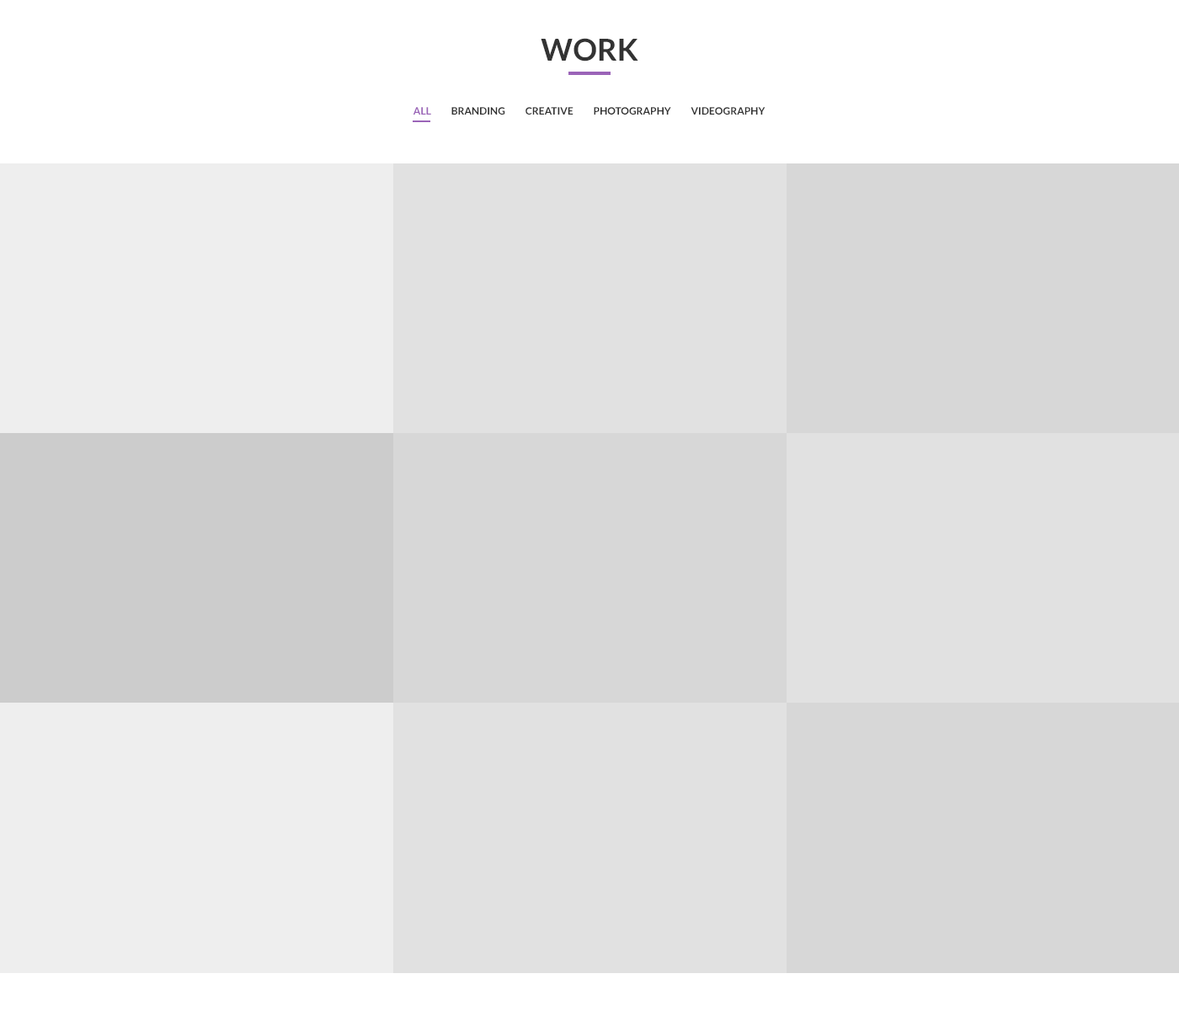
<style>
.page{position:relative;width:1179px;height:1011px;background:#e1e1e1}
.page>*{position:absolute;margin:0}
.t1{font:30.4px "Lato-Bold";letter-spacing:0.005em;color:#333333}
.t2{font:10.1px "Lato-Bold";letter-spacing:0.005em;color:#333333}
.t3{font:10.1px "Lato-Bold";letter-spacing:0.005em;color:#9b64b8}
</style>
<div class="page">
<p class="t1" style="left:541px;top:38px;width:98px;height:24px">WORK</p>
<p class="t2" style="left:413px;top:107px;width:353px;height:8px"><span class="t3">ALL</span>          BRANDING          CREATIVE          PHOTOGRAPHY          VIDEOGRAPHY</p>
</div>
